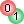
<style>
.page{position:relative;width:24px;height:24px;background:#ffffff}
.page>*{position:absolute;margin:0}
.t1{font:11px "ArialMT";color:#000000}
</style>
<div class="page">
<p class="t1" style="left:5px;top:4px;width:5px;height:8px">0</p>
<p class="t1" style="left:14px;top:12px;width:3px;height:8px">1</p>
</div>
